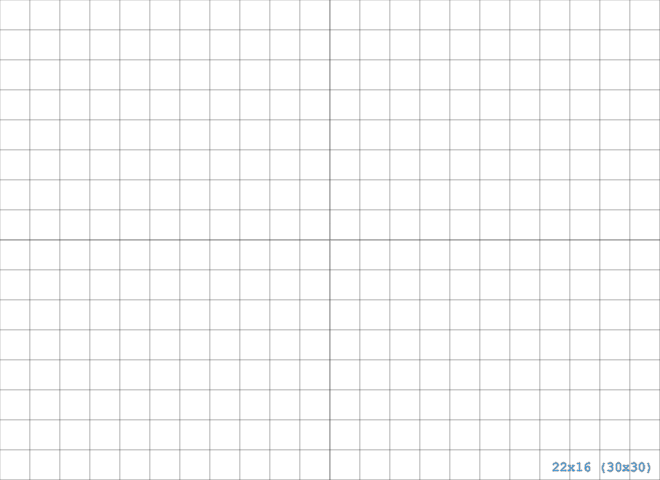
<style>
.page{position:relative;width:660px;height:480px;background:#ffffff}
.page>*{position:absolute;margin:0}
.t1{font:13px "CourierNewPSMT"}
</style>
<div class="page">
<p class="t1" style="left:553px;top:462px;width:97px;height:11px">22x16 (30x30)</p>
</div>
